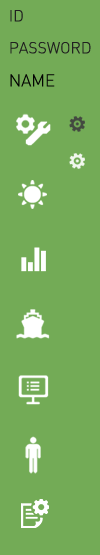
<style>
.page{position:relative;width:100px;height:555px;background:#73ab56}
.page>*{position:absolute;margin:0}
.t1{font:15.8px "DINPro-Light";color:#202020}
.t2{font:16.7px "DINPro-Light";color:#030303}
</style>
<div class="page">
<p class="t1" style="left:10px;top:10px;width:13px;height:12px">ID</p>
<p class="t1" style="left:10px;top:42px;width:81px;height:12px">PASSWORD</p>
<p class="t2" style="left:10px;top:74px;width:45px;height:13px">NAME</p>
</div>
